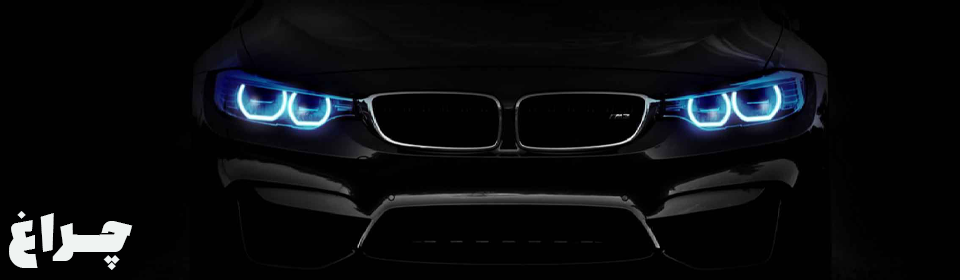
<style>
.page{position:relative;width:960px;height:280px;background:#010101}
.page>*{position:absolute;margin:0}
.t1{font:67.6px "Kaghaz-Bold";color:#eff3f2}
</style>
<div class="page">
<p class="t1" style="left:9px;top:211px;width:124px;height:59px">چــراغ</p>
</div>
